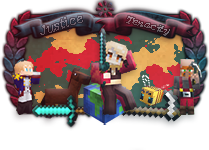
<style>
.page{position:relative;width:209px;height:150px;background:#ffffff}
.page>*{position:absolute;margin:0}
.t1{font:12.9px "News701BT-ItalicA"}
.t2{font:10.1px "News701BT-ItalicA"}
</style>
<div class="page">
<p class="t1" style="left:40px;top:16px;width:43px;height:19px;rotate:-18deg">Justice</p>
<p class="t2" style="left:126px;top:16px;width:44px;height:20px;rotate:15deg">Tenacity</p>
</div>
